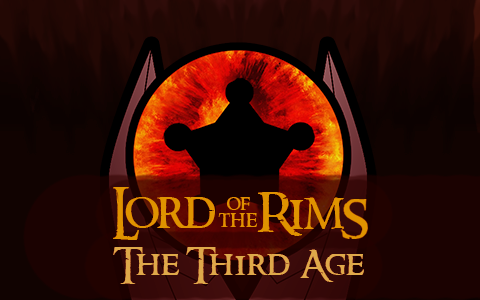
<style>
.page{position:relative;width:480px;height:300px}
.page>*{position:absolute;margin:0}
.t1{font:49.9px "RingbearerMedium";color:#df9300}
.t2{font:20.7px "RingbearerMedium";color:#df9300}
.t3{font:22.8px "RingbearerMedium";color:#df9300}
.t4{font:34.9px "RingbearerMedium";color:#dea94a}
</style>
<div class="page">
<p class="t1" style="left:113px;top:187px;width:102px;height:53px">Lord</p>
<p class="t2" style="left:227px;top:197px;width:23px;height:13px">of</p>
<p class="t1" style="left:257px;top:192px;width:87px;height:44px">Rim</p>
<p class="t3" style="left:218px;top:213px;width:40px;height:14px">the</p>
<p class="t4" style="left:113px;top:247px;width:251px;height:37px">The Third Age</p>
</div>
